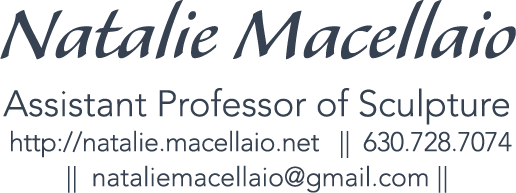
<style>
.page{position:relative;width:516px;height:193px;background:#ffffff}
.page>*{position:absolute;margin:0}
.t1{font:26.7px/35px "AvenirLTStd-Light";letter-spacing:-0.014em;color:#364252}
.t2{font:87.5px/29.2px "AlexaStd";color:#364252}
.t3{font:36.4px/58.3px "AvenirLTStd-Light";color:#364252}
.t4{font:26.7px/35px "AvenirLTStd-Light";color:#364252}
</style>
<div class="page">
<p class="t1" style="left:0px;top:0px;width:516px;height:193px;text-align:center"><span class="t2">Natalie Macellaio<br></span><span class="t3">Assistant Professor of Sculpture<br></span> http://natalie.macellaio.net   ||  630.728.7074<br><span class="t4"> ||  nataliemacellaio@gmail.com ||</span></p>
</div>
